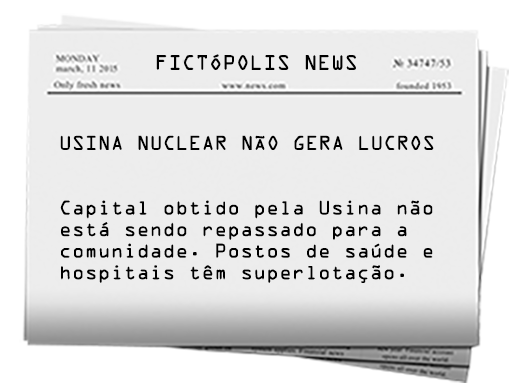
<style>
.page{position:relative;width:512px;height:387px;background:#ededed}
.page>*{position:absolute;margin:0}
.t1{font:18.8px "OCRAStd";color:#000000}
.t2{font:18px "OCRAStd";color:#000000}
</style>
<div class="page">
<p class="t1" style="left:156px;top:54px;width:200px;height:16px">FICTÓPOLIS NEWS</p>
<p class="t2" style="left:60px;top:135px;width:374px;height:148px">USINA NUCLEAR NÃO GERA LUCROS<br><br><br>Capital obtido pela Usina não <br>está sendo repassado para a <br>comunidade. Postos de saúde e <br>hospitais têm superlotação.</p>
</div>
